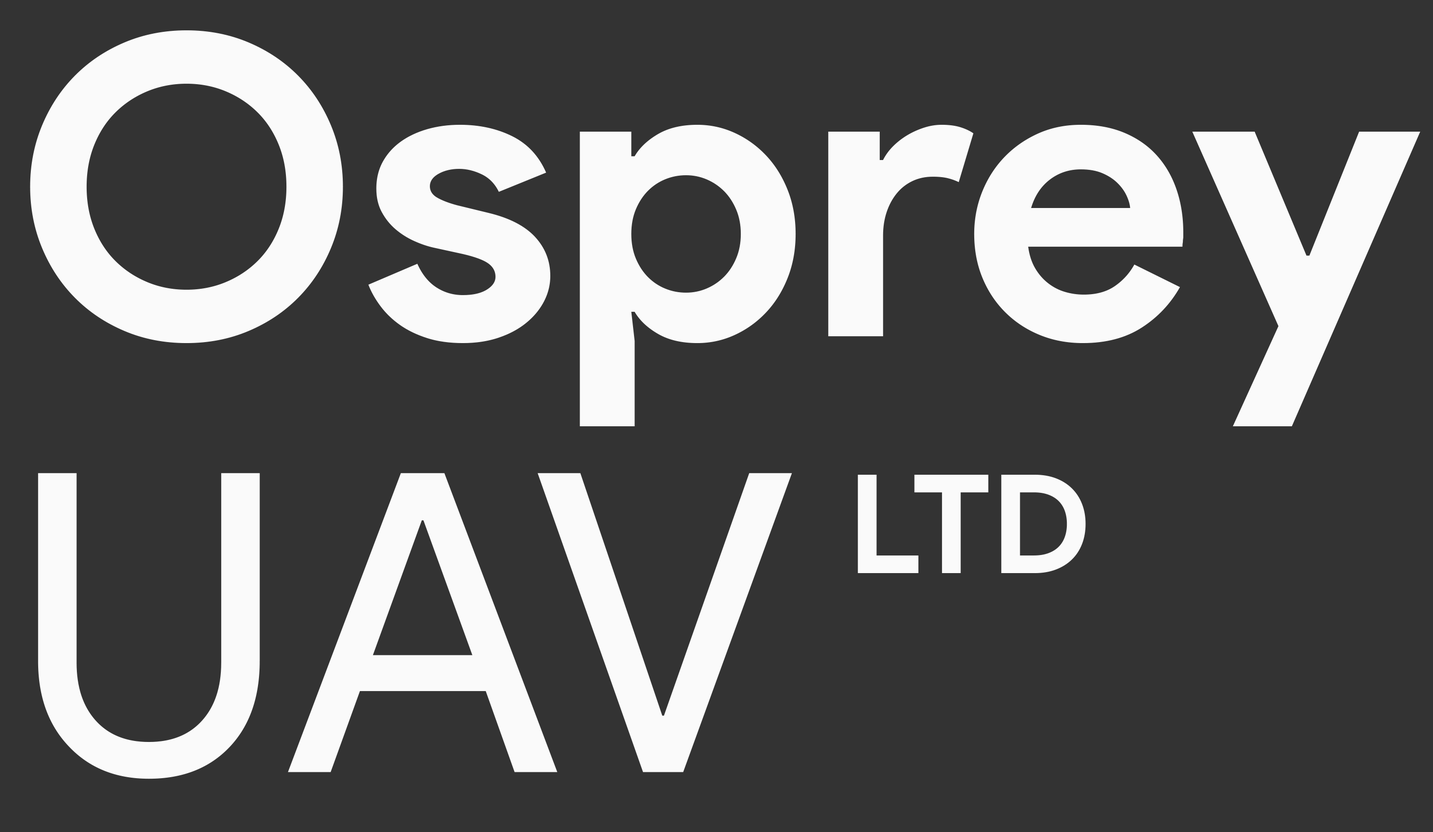
<style>
.page{position:relative;width:1433px;height:832px;background:#333333}
.page>*{position:absolute;margin:0}
.t1{font:417.7px/436.1px "ProductSans-Bold";color:#fafafa}
.t2{font:417.7px/436.1px "ProductSans-Regular";color:#fafafa}
.t3{font:137.5px "ProductSans-Bold";color:#fafafa}
</style>
<div class="page">
<p class="t1" style="left:30px;top:30px;width:1390px;height:749px">Osprey<br><span class="t2">UAV</span></p>
<p class="t3" style="left:858px;top:475px;width:228px;height:98px">LTD</p>
</div>
